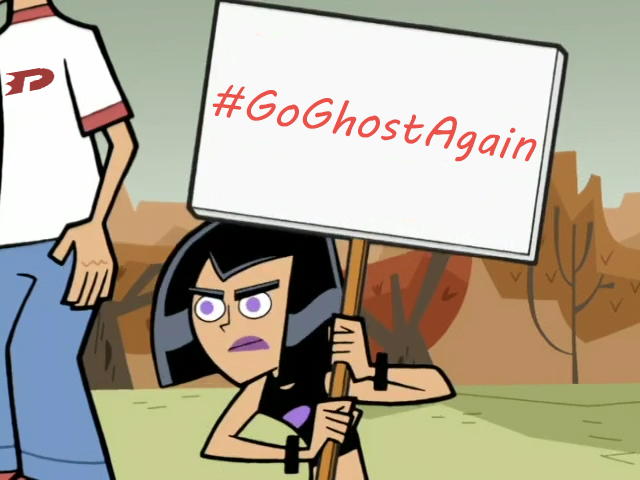
<style>
.page{position:relative;width:640px;height:480px}
.page>*{position:absolute;margin:0}
.t1{font:46.5px "MVBoli";color:#e95149}
</style>
<div class="page">
<p class="t1" style="left:212px;top:84px;width:325px;height:78px;rotate:8deg">#GoGhostAgain</p>
</div>
